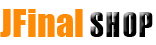
<style>
.page{position:relative;width:156px;height:45px;background:#ffffff}
.page>*{position:absolute;margin:0}
.t1{font:36px "Impact";letter-spacing:0.005em;color:#fc8c07}
.t2{font:36px "Haettenschweiler";letter-spacing:0.075em;color:#050505}
</style>
<div class="page">
<p class="t1" style="left:0px;top:9px;width:83px;height:28px">JFinal</p>
<p class="t2" style="left:90px;top:12px;width:63px;height:25px">SHOP</p>
</div>
